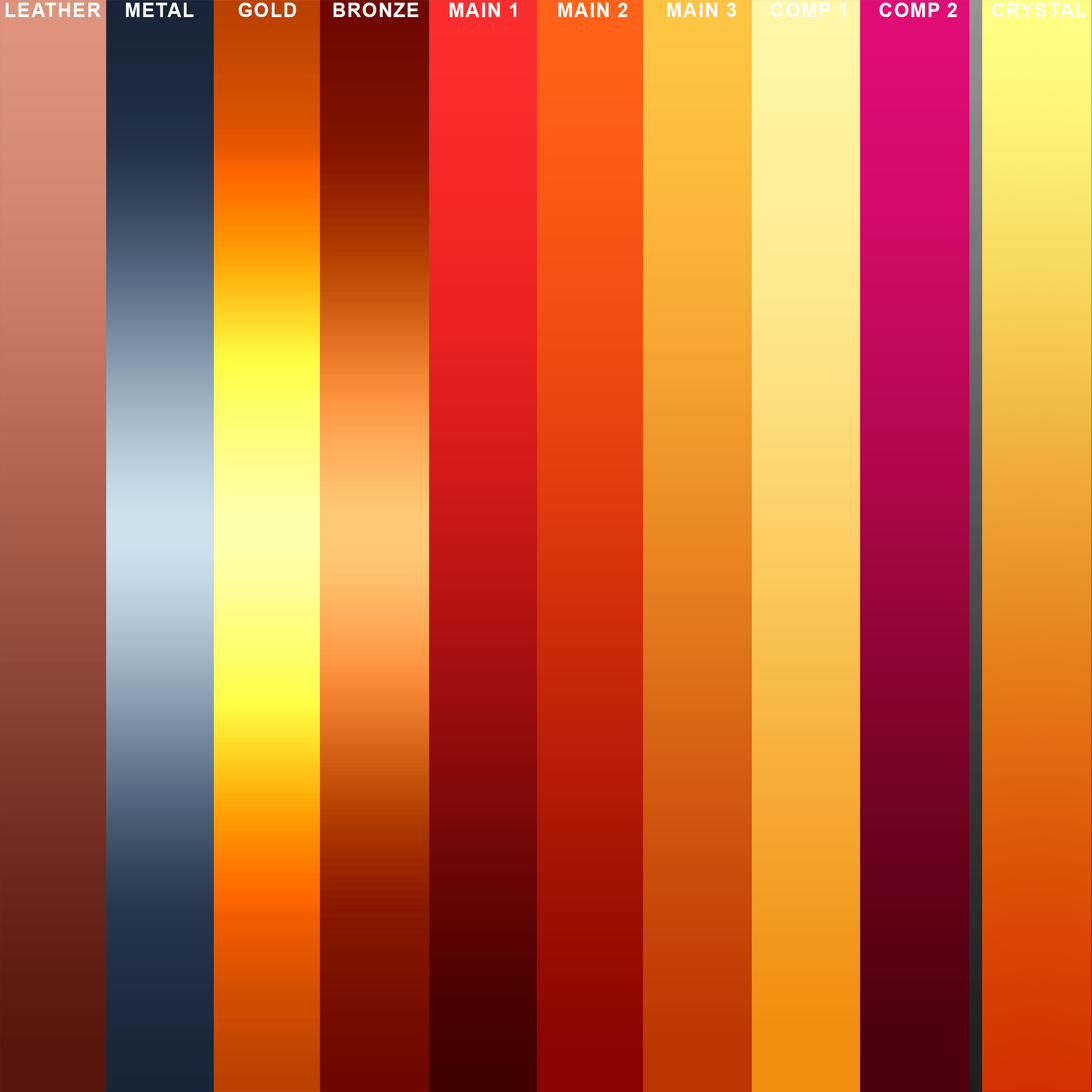
<style>
.page{position:relative;width:1092px;height:1092px}
.page>*{position:absolute;margin:0}
.t1{font:19.6px "Arial-BoldMT";letter-spacing:0.05em;color:#ffffff}
</style>
<div class="page">
<p class="t1" style="left:5px;top:3px;width:96px;height:14px">LEATHER</p>
<p class="t1" style="left:126px;top:3px;width:68px;height:14px">METAL</p>
<p class="t1" style="left:238px;top:3px;width:58px;height:14px">GOLD</p>
<p class="t1" style="left:333px;top:3px;width:86px;height:14px">BRONZE</p>
<p class="t1" style="left:449px;top:3px;width:68px;height:14px">MAIN 1</p>
<p class="t1" style="left:558px;top:3px;width:70px;height:14px">MAIN 2</p>
<p class="t1" style="left:667px;top:3px;width:69px;height:14px">MAIN 3</p>
<p class="t1" style="left:770px;top:3px;width:76px;height:14px">COMP 1</p>
<p class="t1" style="left:879px;top:3px;width:78px;height:14px">COMP 2</p>
<p class="t1" style="left:992px;top:3px;width:94px;height:14px">CRYSTAL</p>
</div>
